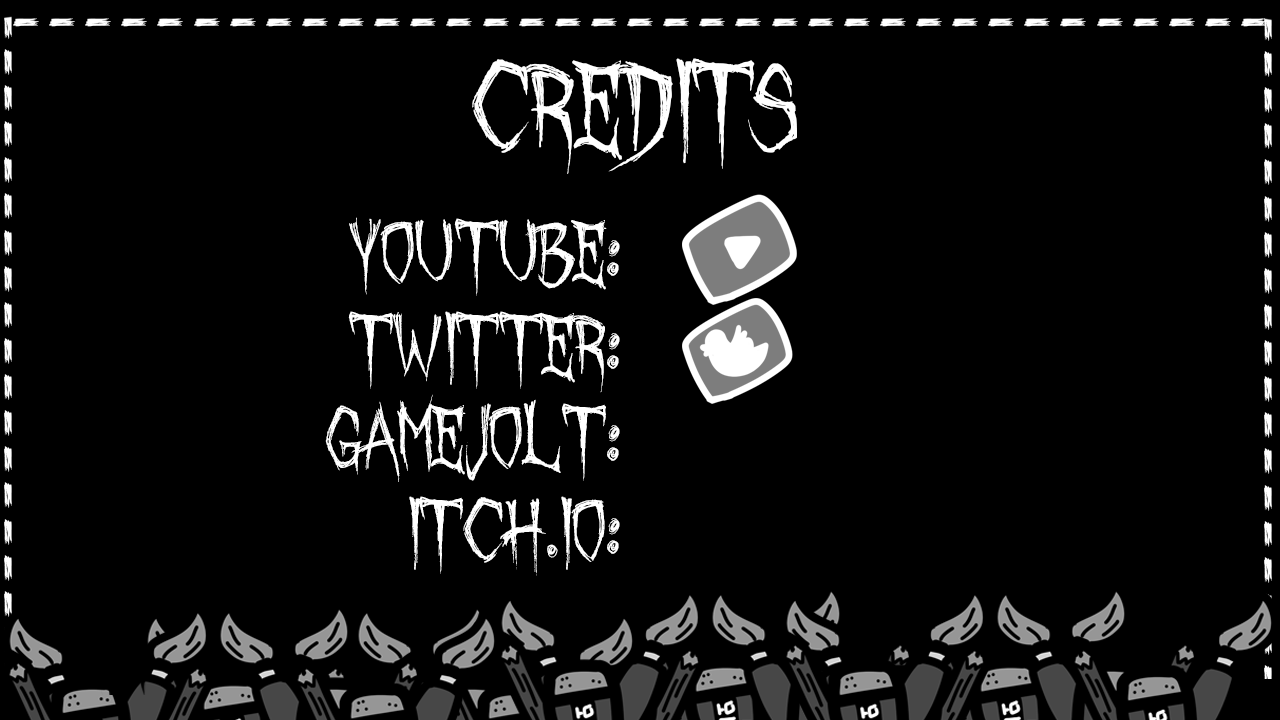
<style>
.page{position:relative;width:1280px;height:720px;background:#000000}
.page>*{position:absolute;margin:0}
.t1{font:110.4px "OctoberCrow";color:#ffffff}
.t2{font:77.1px "OctoberCrow";color:#ffffff}
</style>
<div class="page">
<p class="t1" style="left:13px;top:18px;width:1254px;height:9px">-----------------------------------</p>
<p class="t1" style="left:472px;top:58px;width:325px;height:117px">credits</p>
<p class="t2" style="left:325px;top:217px;width:295px;height:359px;text-align:right">youtube:<br>twitter:<br>gamejolt:<br>itch.io:</p>
</div>
